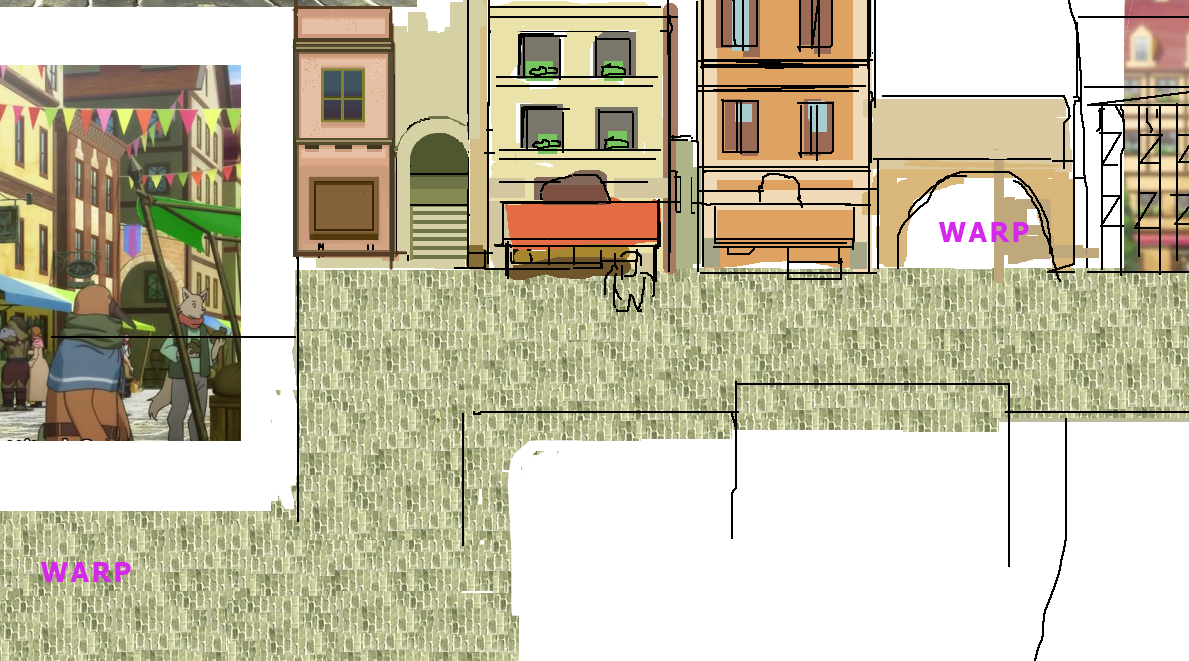
<style>
.page{position:relative;width:1189px;height:661px;background:#ffffff}
.page>*{position:absolute;margin:0}
.t1{font:26.7px "Tahoma-Bold";letter-spacing:0.1em;color:#d628ed}
</style>
<div class="page">
<p class="t1" style="left:938px;top:222px;width:91px;height:20px">WARP</p>
<p class="t1" style="left:40px;top:562px;width:91px;height:20px">WARP</p>
</div>
